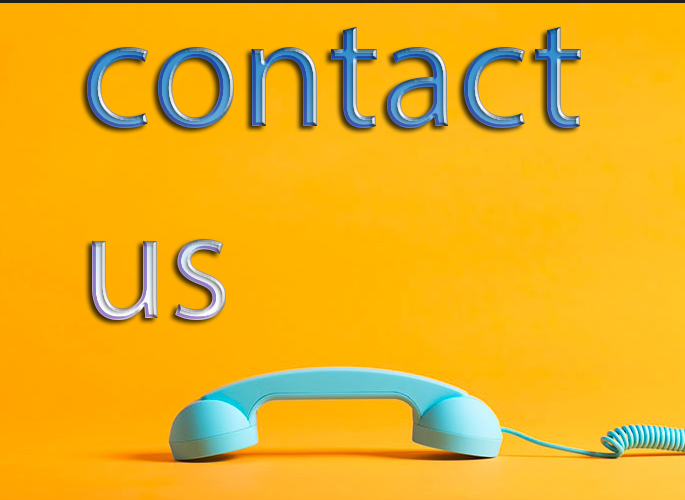
<style>
.page{position:relative;width:685px;height:500px}
.page>*{position:absolute;margin:0}
.t1{font:160px "MyriadHebrew-Regular"}
</style>
<div class="page">
<p class="t1" style="left:87px;top:26px;width:494px;height:294px;text-align:right">contact<br>us</p>
</div>
